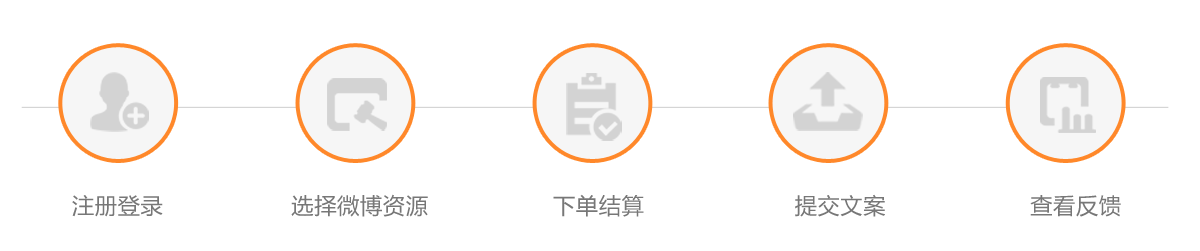
<style>
.page{position:relative;width:1200px;height:251px;background:#ffffff}
.page>*{position:absolute;margin:0}
.t1{font:22.3px "MicrosoftYaHei";letter-spacing:0.025em;color:#777777}
</style>
<div class="page">
<p class="t1" style="left:72px;top:195px;width:91px;height:22px">注册登录</p>
<p class="t1" style="left:291px;top:194px;width:137px;height:23px">选择微博资源</p>
<p class="t1" style="left:553px;top:194px;width:91px;height:23px">下单结算</p>
<p class="t1" style="left:795px;top:194px;width:90px;height:23px">提交文案</p>
<p class="t1" style="left:1030px;top:195px;width:91px;height:22px">查看反馈</p>
</div>
